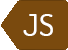
<style>
.page{position:relative;width:68px;height:50px;background:#7a4a0e}
.page>*{position:absolute;margin:0}
.t1{font:30px "Dosis-Medium";color:#ffffff}
</style>
<div class="page">
<p class="t1" style="left:23px;top:14px;width:30px;height:22px">JS</p>
</div>
